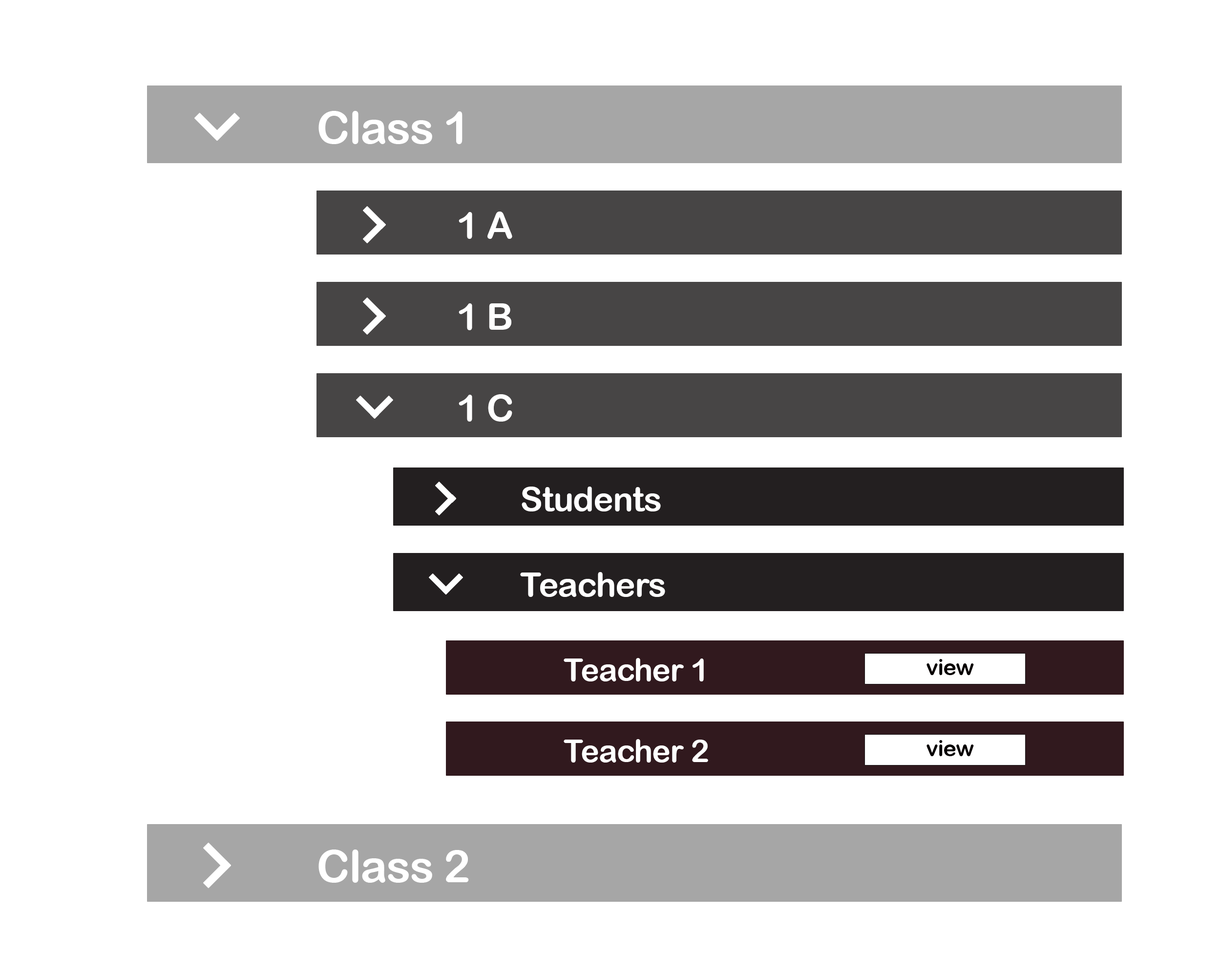
<style>
.page{position:relative;width:1221px;height:977px;background:#ffffff}
.page>*{position:absolute;margin:0}
.t1{font:45px "ArialRoundedMTBold";letter-spacing:-0.02em;color:#ffffff}
.t2{font:37.2px "ArialRoundedMTBold";letter-spacing:-0.02em;color:#ffffff}
.t3{font:33.7px "ArialRoundedMTBold";letter-spacing:-0.02em;color:#ffffff}
.t4{font:31.3px "ArialRoundedMTBold";letter-spacing:-0.02em;color:#ffffff}
.t5{font:22.3px "ArialRoundedMTBold";letter-spacing:-0.02em;color:#060000}
</style>
<div class="page">
<p class="t1" style="left:318px;top:111px;width:144px;height:33px">Class 1</p>
<p class="t2" style="left:459px;top:211px;width:53px;height:28px">1 A</p>
<p class="t2" style="left:459px;top:303px;width:53px;height:27px">1 B</p>
<p class="t2" style="left:459px;top:394px;width:53px;height:27px">1 C</p>
<p class="t3" style="left:522px;top:486px;width:139px;height:25px">Students</p>
<p class="t3" style="left:520px;top:572px;width:145px;height:25px">Teachers</p>
<p class="t4" style="left:564px;top:658px;width:140px;height:23px">Teacher 1</p>
<p class="t5" style="left:926px;top:659px;width:48px;height:16px">view</p>
<p class="t4" style="left:564px;top:739px;width:144px;height:23px">Teacher 2</p>
<p class="t5" style="left:926px;top:740px;width:48px;height:16px">view</p>
<p class="t1" style="left:318px;top:849px;width:151px;height:33px">Class 2</p>
</div>
